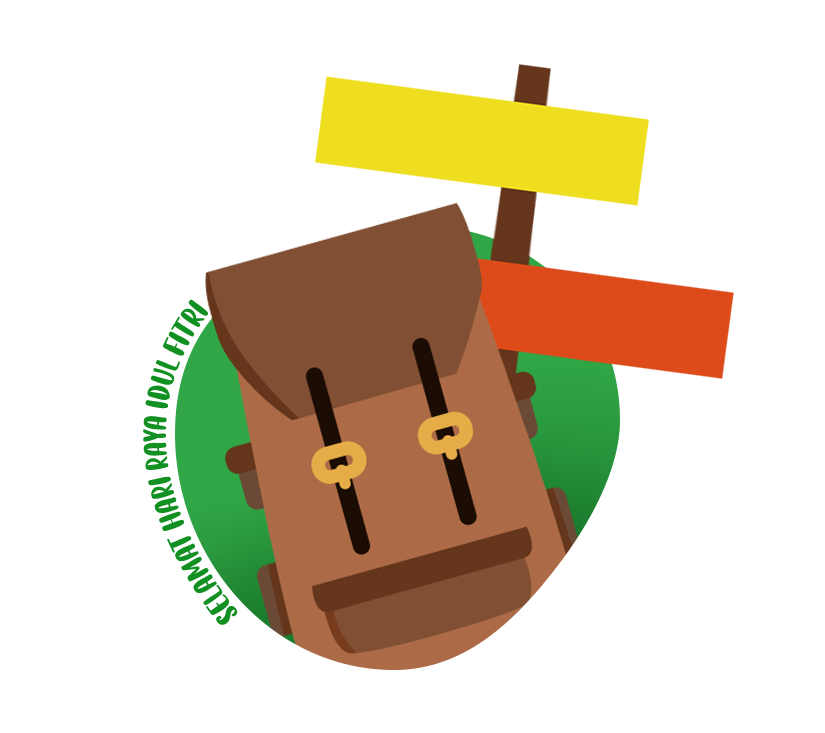
<style>
.page{position:relative;width:825px;height:733px;background:#ffffff}
.page>*{position:absolute;margin:0}
.t1{font:24px "LemonTea";color:#139022}
</style>
<div class="page">
<p class="t1" style="left:143px;top:299px;width:95px;height:326px">Selamat Hari Raya Idul FITRI</p>
</div>
